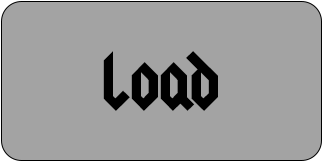
<style>
.page{position:relative;width:322px;height:161px;background:#a3a3a3}
.page>*{position:absolute;margin:0}
.t1{font:72px "Squealer-Regular";color:#000000}
</style>
<div class="page">
<p class="t1" style="left:103px;top:51px;width:115px;height:60px">Load</p>
</div>
